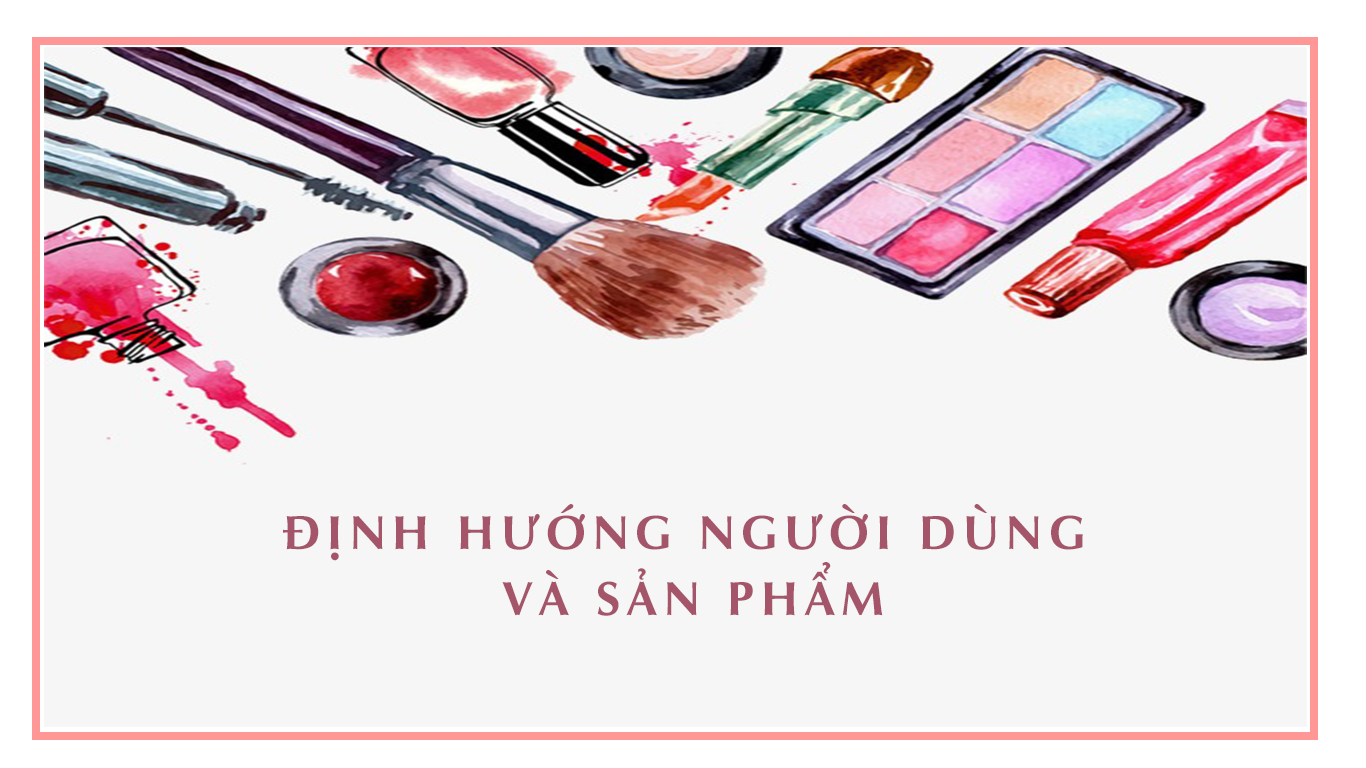
<style>
.page{position:relative;width:1366px;height:768px;background:#f6f6f6}
.page>*{position:absolute;margin:0}
.t1{font:48px/22px "UVNNhanBold";letter-spacing:0.15em;color:#a45569}
</style>
<div class="page">
<p class="t1" style="left:283px;top:504px;width:800px;height:112px;text-align:center">ĐỊNH HƯỚNG NGƯỜI DÙNG <br><br><br>VÀ SẢN PHẨM</p>
</div>
